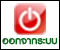
<style>
.page{position:relative;width:60px;height:50px;background:#ffffff}
.page>*{position:absolute;margin:0}
.t1{font:14px "PSLxKittithada-Bold";color:#0f681e;font-weight:bold}
</style>
<div class="page">
<p class="t1" style="left:2px;top:38px;width:55px;height:7px">ออกจากระบบ</p>
</div>
